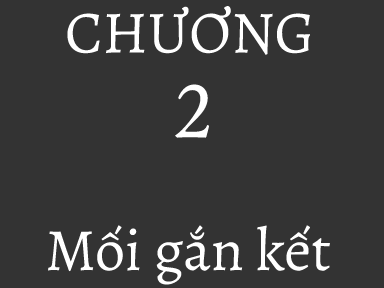
<style>
.page{position:relative;width:384px;height:288px;background:#333333}
.page>*{position:absolute;margin:0}
.t1{font:60px "Alegreya-Regular";color:#ffffff}
</style>
<div class="page">
<p class="t1" style="left:67px;top:6px;width:243px;height:49px">CHƯƠNG</p>
<p class="t1" style="left:48px;top:225px;width:282px;height:60px">Mối gắn kết</p>
</div>
